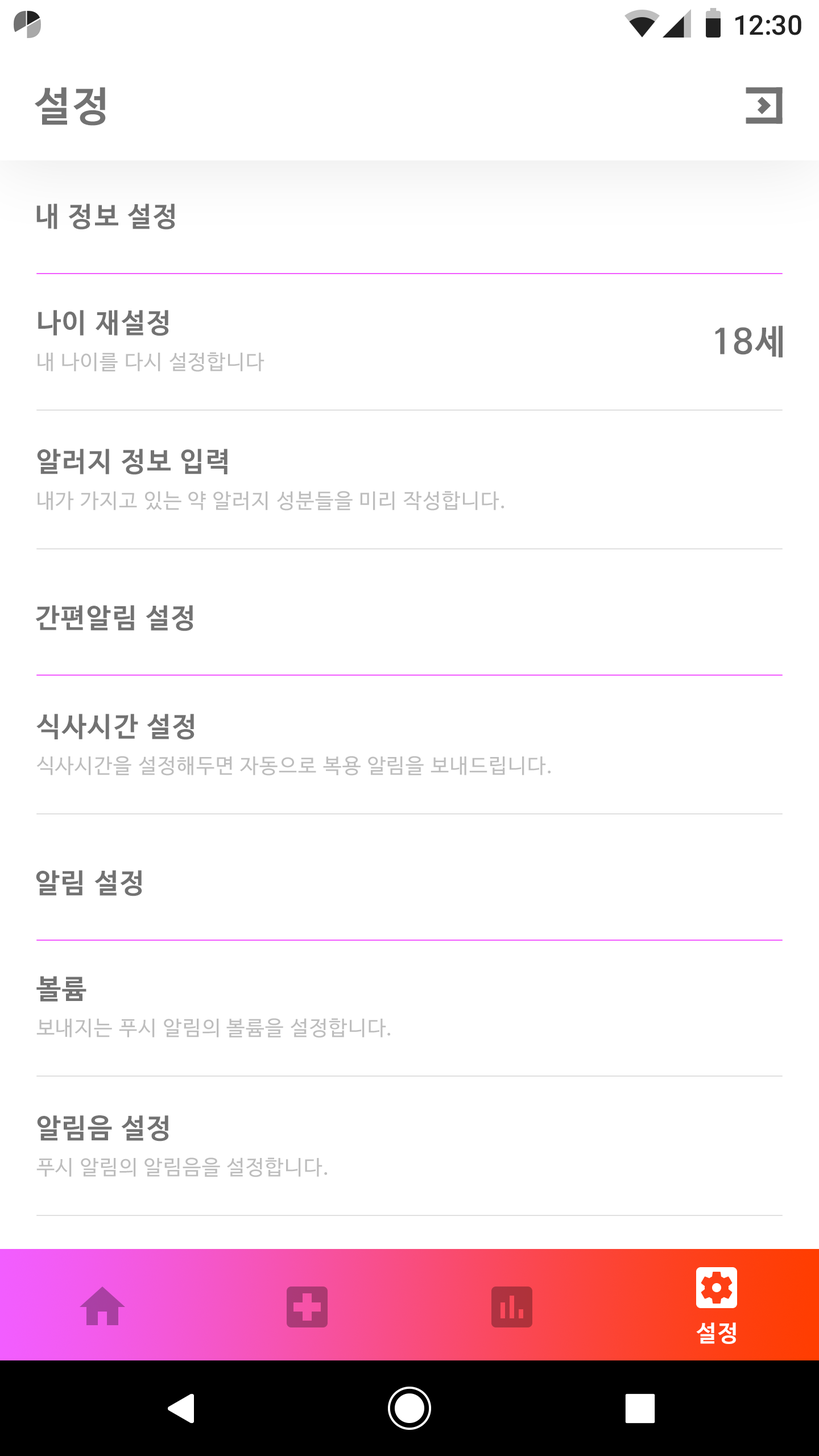
<style>
.page{position:relative;width:819px;height:1456px;background:#ffffff}
.page>*{position:absolute;margin:0}
.t1{font:27.3px "Roboto-Medium";color:#212121}
.t2{font:40.9px "NanumBarunGothicBold";letter-spacing:0.05em;color:#727272}
.t3{font:27.3px "NanumBarunGothicBold";letter-spacing:0.05em;color:#727272}
.t4{font:34.1px "NanumBarunGothicBold";letter-spacing:0.05em;color:#727272}
.t5{font:20.5px "NanumBarunGothic";letter-spacing:0.05em;color:#bdbdbd}
.t6{font:22.7px "NanumBarunGothicBold";letter-spacing:0.05em;color:#ffffff}
</style>
<div class="page">
<p class="t1" style="left:735px;top:15px;width:66px;height:20px">12:30</p>
<p class="t2" style="left:35px;top:87px;width:71px;height:39px">설정</p>
<p class="t3" style="left:36px;top:204px;width:139px;height:26px">내 정보 설정</p>
<p class="t3" style="left:38px;top:310px;width:131px;height:26px">나이 재설정</p>
<p class="t4" style="left:715px;top:325px;width:68px;height:33px">18세</p>
<p class="t5" style="left:38px;top:352px;width:226px;height:20px">내 나이를 다시 설정합니다</p>
<p class="t3" style="left:37px;top:449px;width:190px;height:26px">알러지 정보 입력</p>
<p class="t5" style="left:38px;top:491px;width:466px;height:20px">내가 가지고 있는 약 알러지 성분들을 미리 작성합니다.</p>
<p class="t3" style="left:35px;top:605px;width:158px;height:26px">간편알림 설정</p>
<p class="t3" style="left:36px;top:714px;width:159px;height:26px">식사시간 설정</p>
<p class="t5" style="left:36px;top:756px;width:515px;height:20px">식사시간을 설정해두면 자동으로 복용 알림을 보내드립니다.</p>
<p class="t3" style="left:36px;top:870px;width:106px;height:26px">알림 설정</p>
<p class="t3" style="left:36px;top:976px;width:50px;height:26px">볼륨</p>
<p class="t5" style="left:36px;top:1018px;width:355px;height:20px">보내지는 푸시 알림의 볼륨을 설정합니다.</p>
<p class="t3" style="left:37px;top:1115px;width:132px;height:26px">알림음 설정</p>
<p class="t5" style="left:36px;top:1157px;width:292px;height:20px">푸시 알림의 알림음을 설정합니다.</p>
<p class="t6" style="left:696px;top:1322px;width:40px;height:22px">설정</p>
</div>
